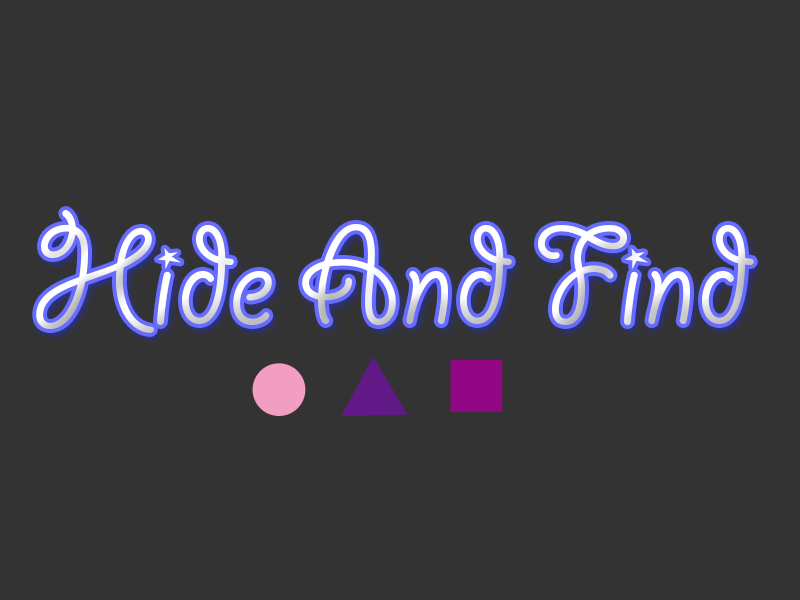
<style>
.page{position:relative;width:800px;height:600px;background:#333333}
.page>*{position:absolute;margin:0}
.t1{font:153.9px "GiddyupStd";color:#ffffff}
</style>
<div class="page">
<p class="t1" style="left:36px;top:210px;width:718px;height:123px">Hide And Find</p>
</div>
